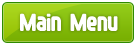
<style>
.page{position:relative;width:136px;height:45px;background:#ffffff}
.page>*{position:absolute;margin:0}
.t1{font:22px "FontopoFONTOPO";color:#ffffff}
</style>
<div class="page">
<p class="t1" style="left:20px;top:13px;width:98px;height:18px">Main Menu</p>
</div>
